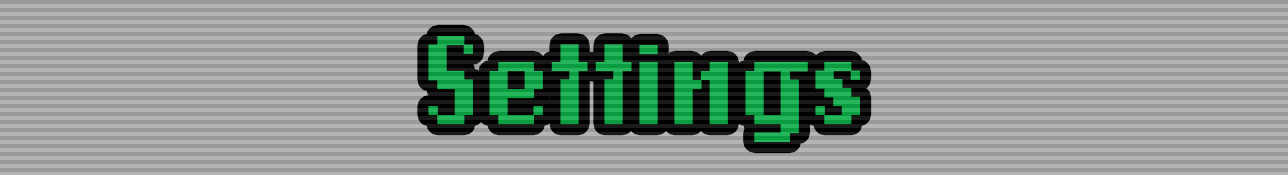
<style>
.page{position:relative;width:1288px;height:175px;background:#b4b4b4}
.page>*{position:absolute;margin:0}
.t1{font:131.9px "LoRes15OT-BoldAltOakland"}
</style>
<div class="page">
<p class="t1" style="left:428px;top:36px;width:432px;height:106px">Settings</p>
</div>
